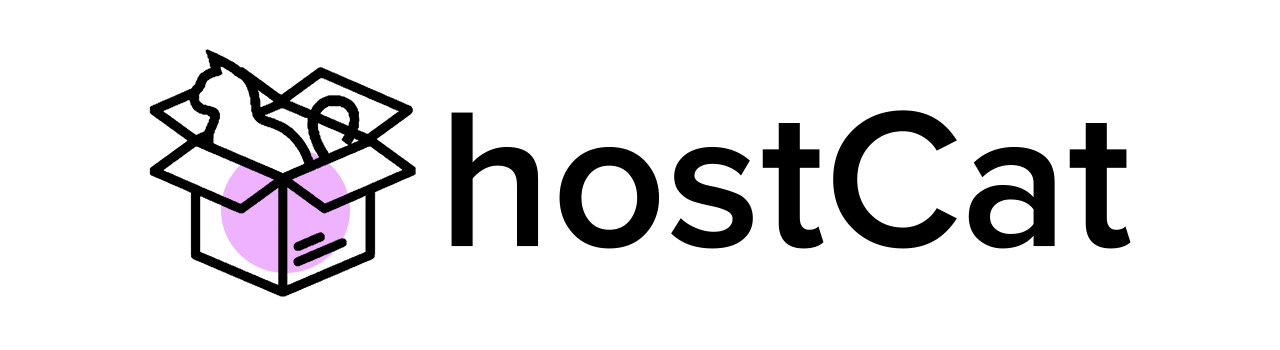
<style>
.page{position:relative;width:1280px;height:350px;background:#ffffff}
.page>*{position:absolute;margin:0}
.t1{font:200px "ProximaNova-Semibold";color:#000000}
</style>
<div class="page">
<p class="t1" style="left:451px;top:110px;width:680px;height:139px">hostCat</p>
</div>
